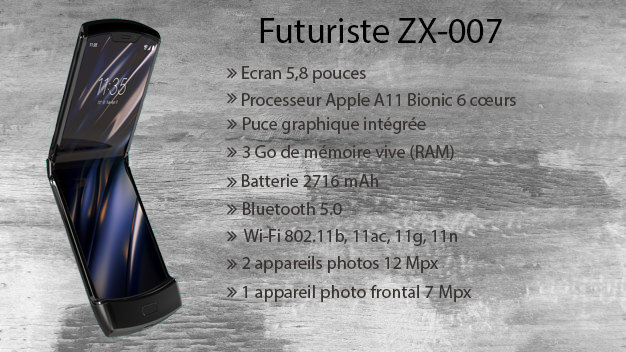
<style>
.page{position:relative;width:626px;height:352px}
.page>*{position:absolute;margin:0}
.t1{font:36px "MyriadPro-Regular";color:#000000}
.t2{font:18px "MyriadPro-Regular";color:#383330}
.t3{font:18px "FontAwesome";color:#383330}
</style>
<div class="page">
<p class="t1" style="left:260px;top:18px;width:242px;height:25px">Futuriste ZX-007</p>
<p class="t2" style="left:242px;top:66px;width:124px;height:17px">Ecran 5,8 pouces</p>
<p class="t2" style="left:242px;top:93px;width:274px;height:17px">Processeur Apple A11 Bionic 6 cœurs</p>
<p class="t2" style="left:243px;top:117px;width:183px;height:17px">Puce graphique intégrée</p>
<p class="t2" style="left:242px;top:145px;width:212px;height:15px">3 Go de mémoire vive (RAM)</p>
<p class="t2" style="left:242px;top:174px;width:136px;height:13px">Batterie 2716 mAh</p>
<p class="t2" style="left:243px;top:202px;width:99px;height:13px">Bluetooth 5.0</p>
<p class="t2" style="left:244px;top:229px;width:213px;height:17px">Wi-Fi 802.11b, 11ac, 11g, 11n</p>
<p class="t2" style="left:242px;top:256px;width:197px;height:17px">2 appareils photos 12 Mpx</p>
<p class="t2" style="left:243px;top:285px;width:229px;height:17px"><span class="t3"><br></span>1 appareil photo frontal 7 Mpx</p>
</div>
